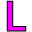
<style>
.page{position:relative;width:32px;height:32px;background:#ffffff}
.page>*{position:absolute;margin:0}
.t1{font:41.7px "Inter-Bold";color:#f500ff}
</style>
<div class="page">
<p class="t1" style="left:6px;top:0px;width:21px;height:32px">L</p>
</div>
